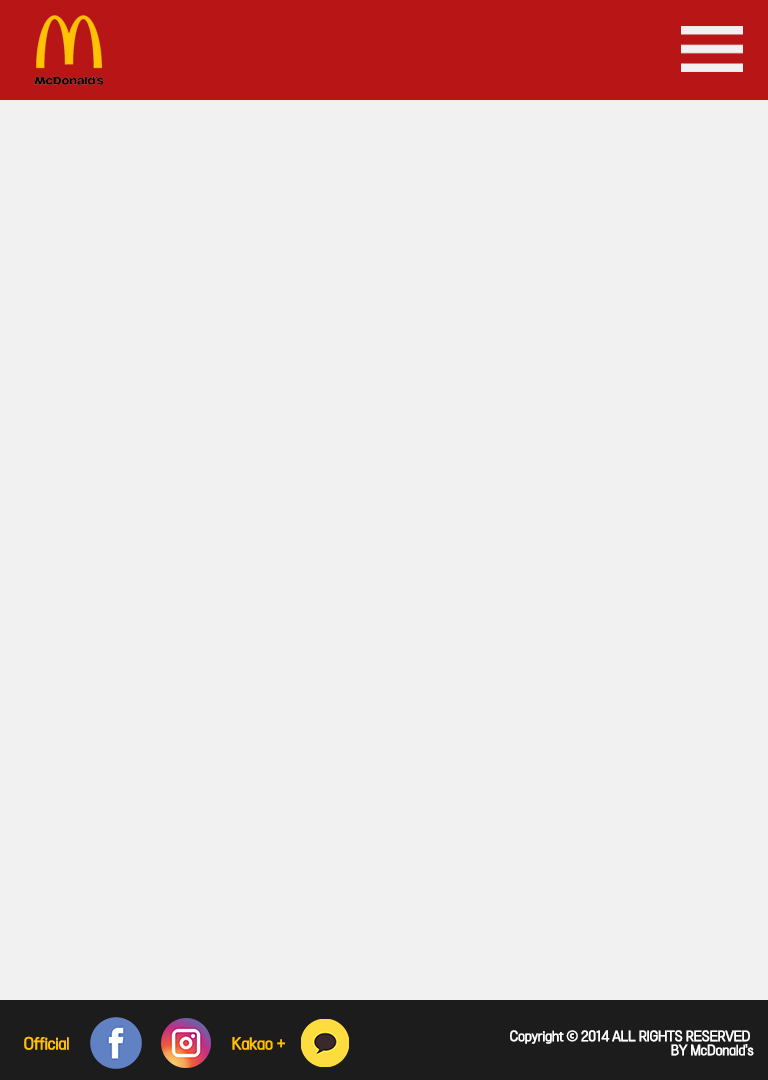
<style>
.page{position:relative;width:768px;height:1080px;background:#f1f1f1}
.page>*{position:absolute;margin:0}
.t1{font:14px "TTOmniGothicM";letter-spacing:-0.05em;color:#ffc100;font-weight:bold}
.t2{font:12px/14px "TTOmniGothicM";letter-spacing:-0.05em;color:#ffffff;font-weight:bold}
</style>
<div class="page">
<p class="t1" style="left:24px;top:1036px;width:45px;height:14px">Official</p>
<p class="t1" style="left:232px;top:1037px;width:53px;height:13px">Kakao +</p>
<p class="t2" style="left:510px;top:1030px;width:244px;height:26px;text-align:right">Copyright ⓒ 2014 ALL RIGHTS RESERVED <br>BY McDonald's</p>
</div>
